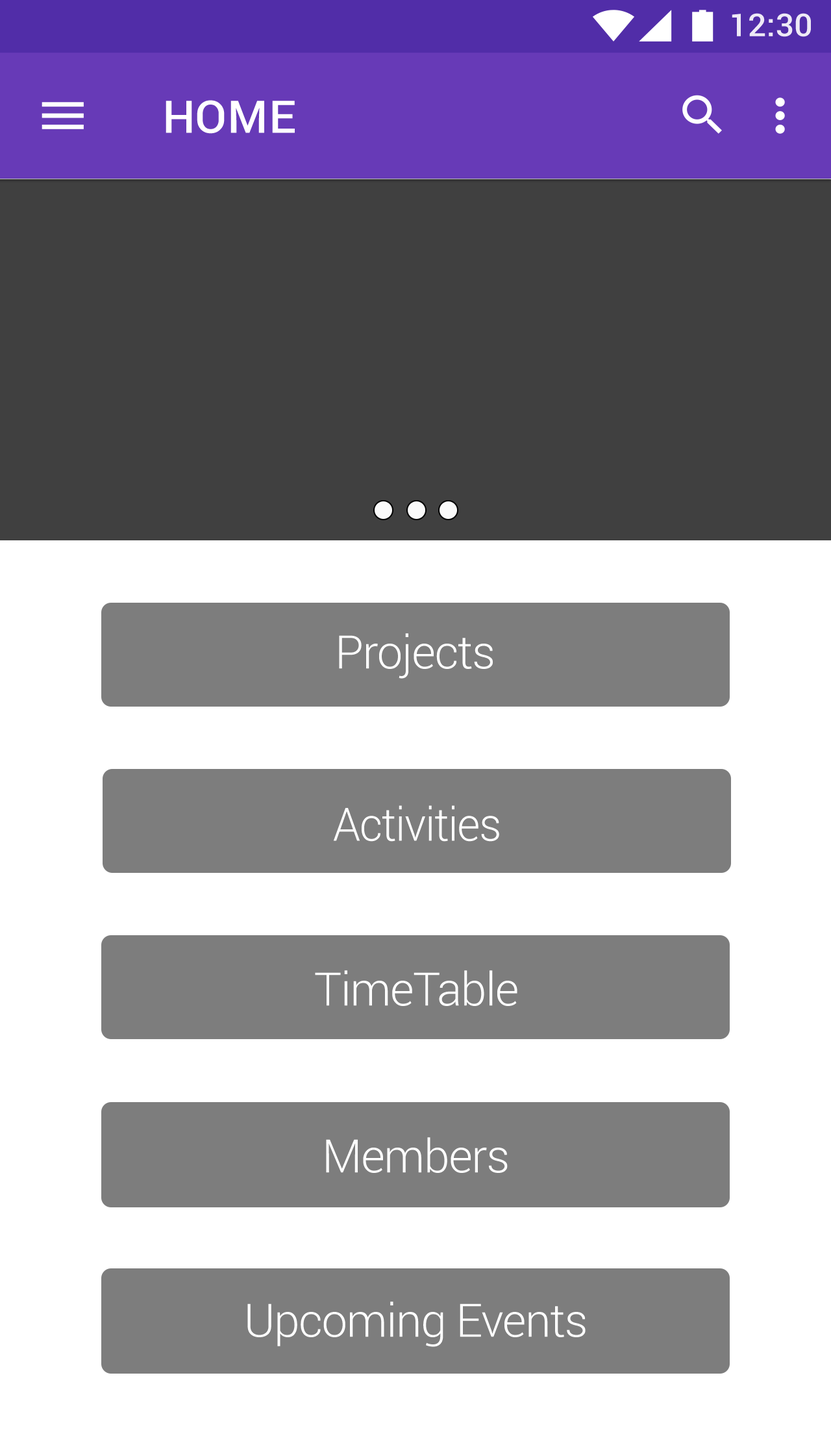
<style>
.page{position:relative;width:831px;height:1434px;background:#ffffff}
.page>*{position:absolute;margin:0}
.t1{font:31.5px "Roboto-Medium";color:#eeeaf6}
.t2{font:45px "Roboto-Medium";color:#ffffff}
.t3{font:46.2px "Roboto-Light";letter-spacing:-0.02em;color:#ffffff}
.t4{font:46.2px "Roboto-Light";letter-spacing:-0.02em;color:#ffffff;scale:0.96 1}
</style>
<div class="page">
<p class="t1" style="left:732px;top:13px;width:79px;height:24px">12:30</p>
<p class="t2" style="left:166px;top:100px;width:129px;height:34px">HOME</p>
<p class="t3" style="left:339px;top:633px;width:154px;height:46px">Projects</p>
<p class="t4" style="left:333px;top:805px;width:167px;height:37px">Activities</p>
<p class="t3" style="left:315px;top:970px;width:203px;height:36px">TimeTable</p>
<p class="t3" style="left:326px;top:1137px;width:182px;height:36px">Members</p>
<p class="t3" style="left:247px;top:1302px;width:339px;height:45px">Upcoming Events</p>
</div>
